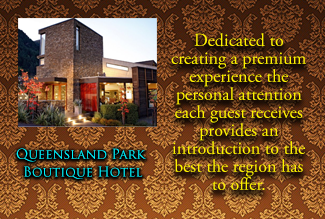
<style>
.page{position:relative;width:325px;height:219px}
.page>*{position:absolute;margin:0}
.t1{font:18px/18px "AGaramondPro-Regular";color:#fff200}
.t2{font:13.4px/17.9px "TrajanPro-Regular";color:#00f6ff}
</style>
<div class="page">
<p class="t1" style="left:171px;top:33px;width:135px;height:157px;text-align:center">Dedicated to creating a premium experience the personal attention each guest receives provides an introduction to the best the region has to offer.</p>
<p class="t2" style="left:16px;top:148px;width:130px;height:31px;text-align:center">Queensland Park<br> Boutique Hotel</p>
</div>
